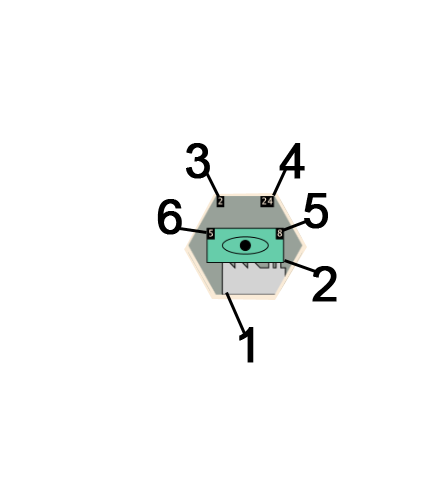
<style>
.page{position:relative;width:426px;height:494px;background:#ffffff}
.page>*{position:absolute;margin:0}
.t1{font:48px "ArialMT";color:#000000;font-weight:bold}
</style>
<div class="page">
<p class="t1" style="left:186px;top:143px;width:24px;height:36px">3</p>
<p class="t1" style="left:279px;top:143px;width:26px;height:36px">4</p>
<p class="t1" style="left:304px;top:193px;width:24px;height:36px">5</p>
<p class="t1" style="left:157px;top:199px;width:25px;height:36px">6</p>
<p class="t1" style="left:312px;top:266px;width:25px;height:36px">2</p>
<p class="t1" style="left:239px;top:327px;width:15px;height:36px">1</p>
</div>
